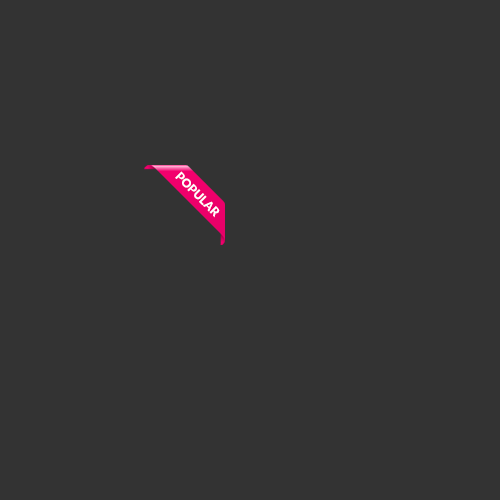
<style>
.page{position:relative;width:500px;height:500px;background:#333333}
.page>*{position:absolute;margin:0}
.t1{font:12px "Lato-Black";color:#ffffff;text-transform:uppercase}
</style>
<div class="page">
<p class="t1" style="left:175px;top:171px;width:45px;height:47px;rotate:45deg">popular</p>
</div>
